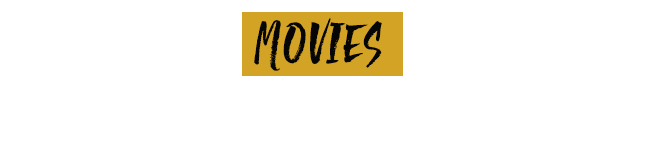
<style>
.page{position:relative;width:656px;height:144px;background:#ffffff}
.page>*{position:absolute;margin:0}
.t1{font:52px "TheFridayStroke";letter-spacing:0.025em;color:#060606}
</style>
<div class="page">
<p class="t1" style="left:254px;top:17px;width:128px;height:54px">MOVIES</p>
</div>
